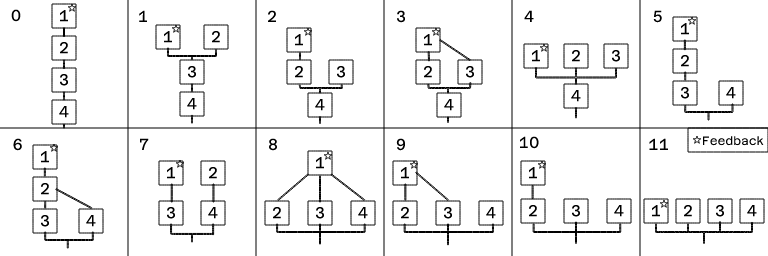
<style>
.page{position:relative;width:768px;height:256px;background:#ffffff}
.page>*{position:absolute;margin:0}
.t1{font:16px "AzeretMono-Regular";color:#000000}
.t2{font:12px "AzeretMono-Regular";color:#000000}
</style>
<div class="page">
<p class="t1" style="left:11px;top:9px;width:10px;height:13px">0</p>
<p class="t1" style="left:139px;top:10px;width:9px;height:12px">1</p>
<p class="t1" style="left:268px;top:10px;width:8px;height:12px">2</p>
<p class="t1" style="left:397px;top:10px;width:9px;height:13px">3</p>
<p class="t1" style="left:524px;top:10px;width:10px;height:12px">4</p>
<p class="t1" style="left:653px;top:10px;width:9px;height:13px">5</p>
<p class="t1" style="left:519px;top:136px;width:20px;height:13px">10</p>
<p class="t2" style="left:702px;top:136px;width:62px;height:10px">Feedback</p>
<p class="t1" style="left:13px;top:138px;width:9px;height:13px">6</p>
<p class="t1" style="left:139px;top:138px;width:10px;height:12px">7</p>
<p class="t1" style="left:269px;top:138px;width:8px;height:13px">8</p>
<p class="t1" style="left:396px;top:138px;width:10px;height:13px">9</p>
<p class="t1" style="left:649px;top:138px;width:19px;height:12px">11</p>
</div>
